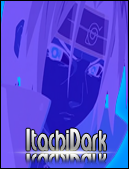
<style>
.page{position:relative;width:129px;height:169px}
.page>*{position:absolute;margin:0}
.t1{font:24px "Minerva"}
</style>
<div class="page">
<p class="t1" style="left:26px;top:128px;width:80px;height:23px">ItachiDark</p>
</div>
